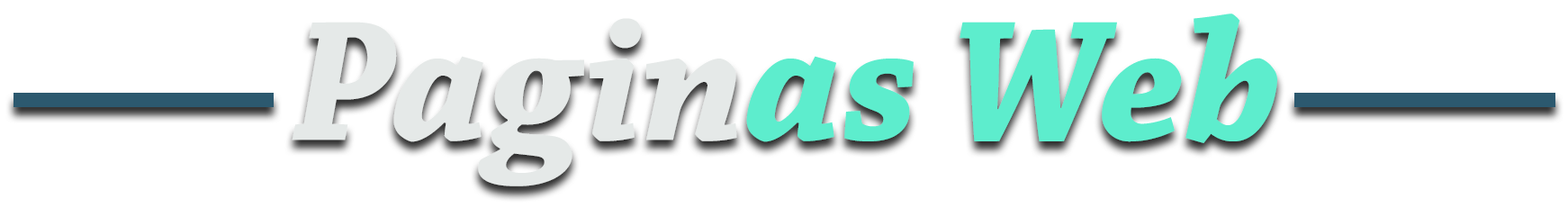
<style>
.page{position:relative;width:1568px;height:208px;background:#ffffff}
.page>*{position:absolute;margin:0}
.t1{font:180px "ChaparralPro-BoldIt";color:#5dedcd}
.t2{font:180px "ChaparralPro-BoldIt";color:#e5e9e8}
</style>
<div class="page">
<p class="t1" style="left:292px;top:14px;width:985px;height:172px"><span class="t2">Pagin</span>as Web</p>
</div>
